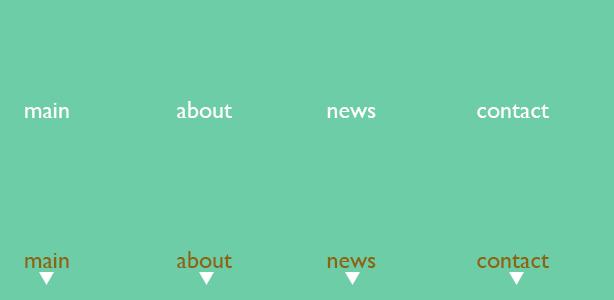
<style>
.page{position:relative;width:614px;height:300px;background:#6ccda6}
.page>*{position:absolute;margin:0}
.t1{font:24px "GillSansMT";color:#fffefe}
.t2{font:24px "GillSansMT";color:#8c640f}
</style>
<div class="page">
<p class="t1" style="left:25px;top:101px;width:525px;height:17px">main                about              news               contact</p>
<p class="t2" style="left:25px;top:251px;width:525px;height:17px">main                about              news               contact</p>
</div>
